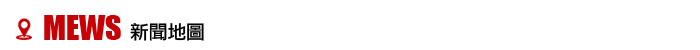
<style>
.page{position:relative;width:700px;height:50px;background:#ffffff}
.page>*{position:absolute;margin:0}
.t1{font:32px "Impact";color:#c70104}
.t2{font:18.7px "LiGothicMed";color:#000000}
</style>
<div class="page">
<p class="t1" style="left:44px;top:15px;width:77px;height:25px">MEWS</p>
<p class="t2" style="left:130px;top:23px;width:74px;height:18px">新聞地圖</p>
</div>
